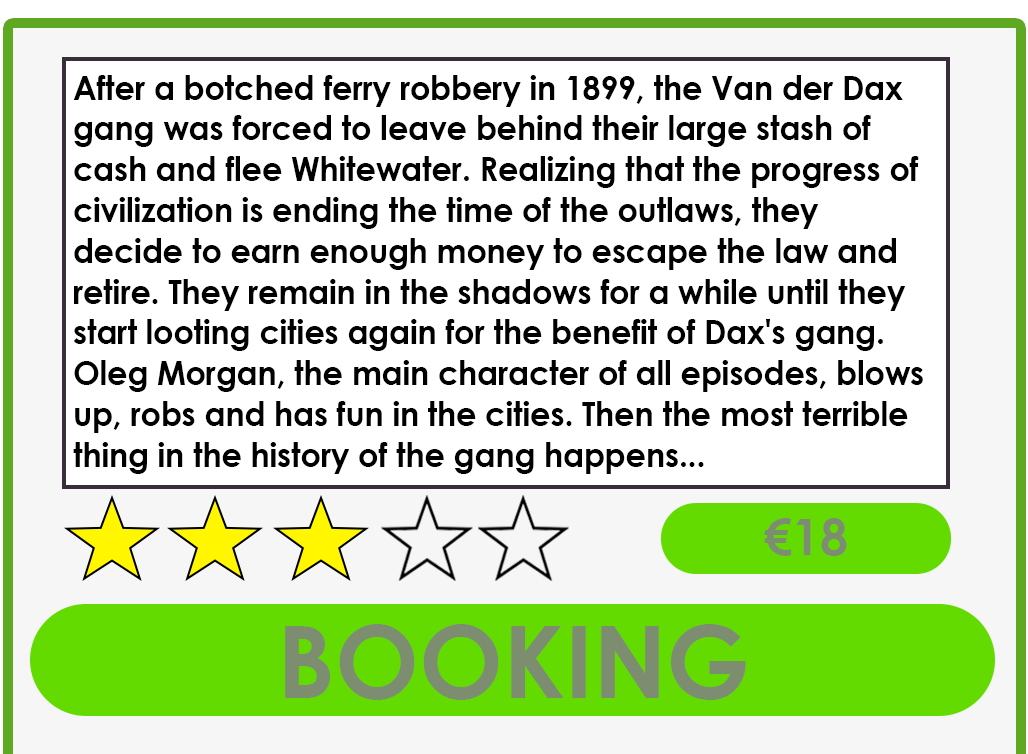
<style>
.page{position:relative;width:1028px;height:754px;background:#ffffff}
.page>*{position:absolute;margin:0}
.t1{font:34px "CenturyGothic-Bold";color:#000000;scale:0.93 1}
.t2{font:50px "CenturyGothic-Bold";color:#7d8d6f}
.t3{font:100px "CenturyGothic-Bold";color:#7d8d6f}
</style>
<div class="page">
<p class="t1" style="left:73px;top:75px;width:850px;height:399px">After a botched ferry robbery in 1899, the Van der Dax gang was forced to leave behind their large stash of cash and flee Whitewater. Realizing that the progress of civilization is ending the time of the outlaws, they decide to earn enough money to escape the law and retire. They remain in the shadows for a while until they start looting cities again for the benefit of Dax's gang. Oleg Morgan, the main character of all episodes, blows up, robs and has fun in the cities. Then the most terrible thing in the history of the gang happens...</p>
<p class="t2" style="left:764px;top:518px;width:83px;height:38px">€18</p>
<p class="t3" style="left:285px;top:624px;width:461px;height:76px">BOOKING</p>
</div>
